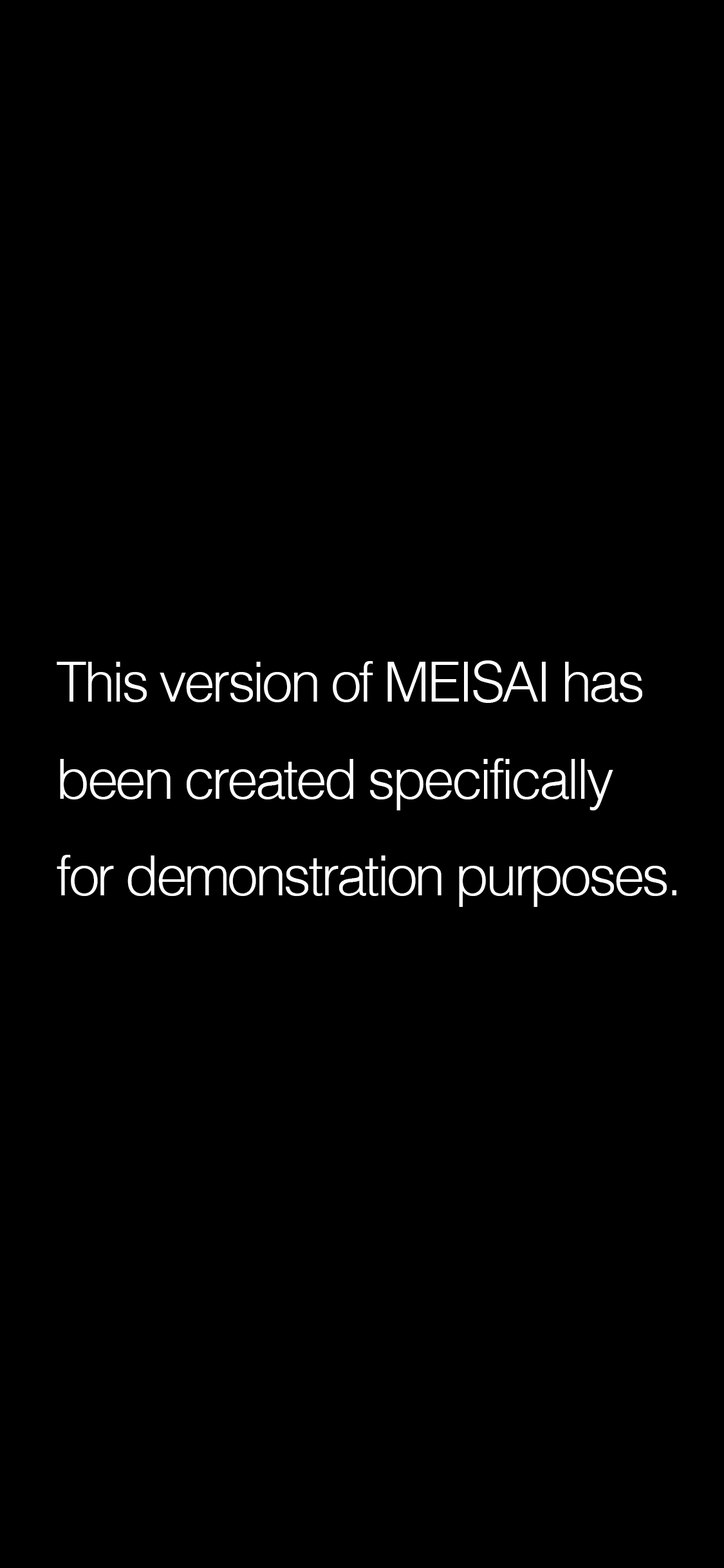
<style>
.page{position:relative;width:724px;height:1568px;background:#000000}
.page>*{position:absolute;margin:0}
.t1{font:55.3px "Helvetica-Light";letter-spacing:-0.05em;color:#ffffff}
</style>
<div class="page">
<p class="t1" style="left:57px;top:660px;width:620px;height:247px">This version of MEISAI has<br>been created specifically <br>for demonstration purposes.</p>
</div>
